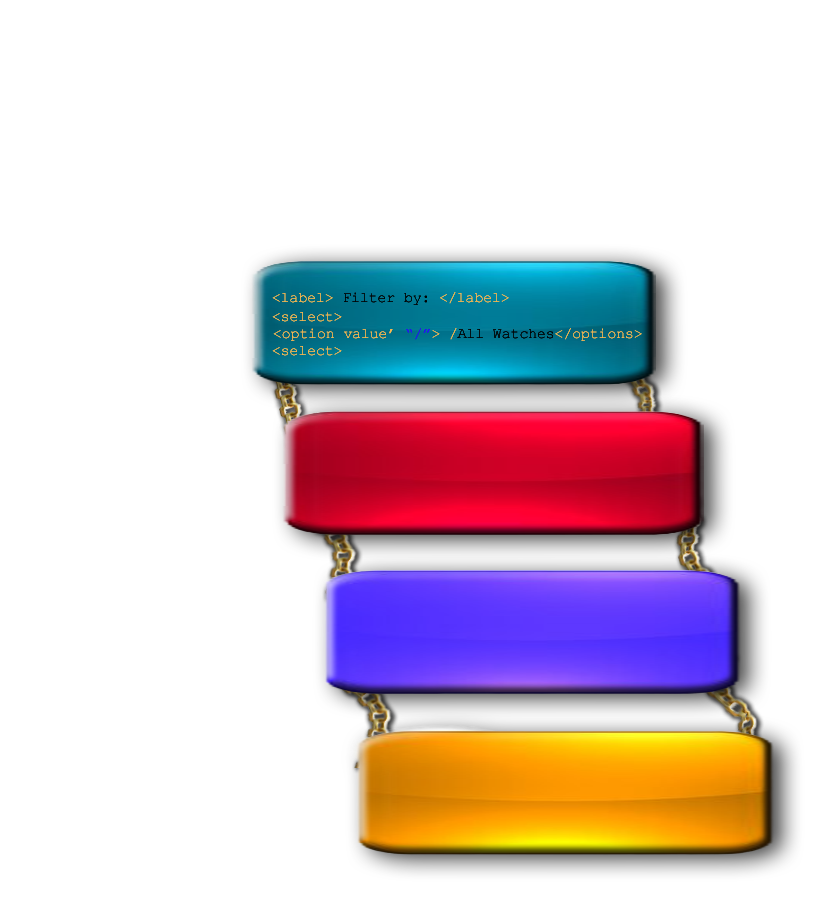
<style>
.page{position:relative;width:814px;height:914px;background:#ffffff}
.page>*{position:absolute;margin:0}
.t1{font:14.7px "CourierNewPSMT";color:#020202}
.t2{font:14.7px "CourierNewPSMT";color:#f8b750}
.t3{font:14.7px "CourierNewPSMT";color:#2116ee}
.t4{font:14.7px "CourierNewPSMT";color:#010101}
</style>
<div class="page">
<p class="t1" style="left:272px;top:292px;width:237px;height:13px"><span class="t2">&lt;label&gt; </span>Filter by:<span class="t2"> &lt;/label&gt;</span></p>
<p class="t1" style="left:272px;top:292px;width:237px;height:13px"><span class="t2">&lt;label&gt; </span>Filter by:<span class="t2"> &lt;/label&gt;</span></p>
<p class="t1" style="left:272px;top:292px;width:237px;height:13px"><span class="t2">&lt;label&gt; </span>Filter by:<span class="t2"> &lt;/label&gt;</span></p>
<p class="t2" style="left:272px;top:312px;width:70px;height:10px">&lt;select&gt;</p>
<p class="t2" style="left:272px;top:312px;width:70px;height:10px">&lt;select&gt;</p>
<p class="t2" style="left:272px;top:312px;width:70px;height:10px">&lt;select&gt;</p>
<p class="t2" style="left:273px;top:328px;width:369px;height:13px">&lt;option value’ <span class="t3">“/”</span>&gt; /<span class="t4">All Watches</span>&lt;/options&gt;</p>
<p class="t2" style="left:273px;top:328px;width:369px;height:13px">&lt;option value’ <span class="t3">“/”</span>&gt; /<span class="t4">All Watches</span>&lt;/options&gt;</p>
<p class="t2" style="left:273px;top:328px;width:369px;height:13px">&lt;option value’ <span class="t3">“/”</span>&gt; /<span class="t4">All Watches</span>&lt;/options&gt;</p>
<p class="t2" style="left:272px;top:346px;width:70px;height:10px">&lt;select&gt;</p>
<p class="t2" style="left:272px;top:346px;width:70px;height:10px">&lt;select&gt;</p>
<p class="t2" style="left:272px;top:346px;width:70px;height:10px">&lt;select&gt;</p>
</div>
